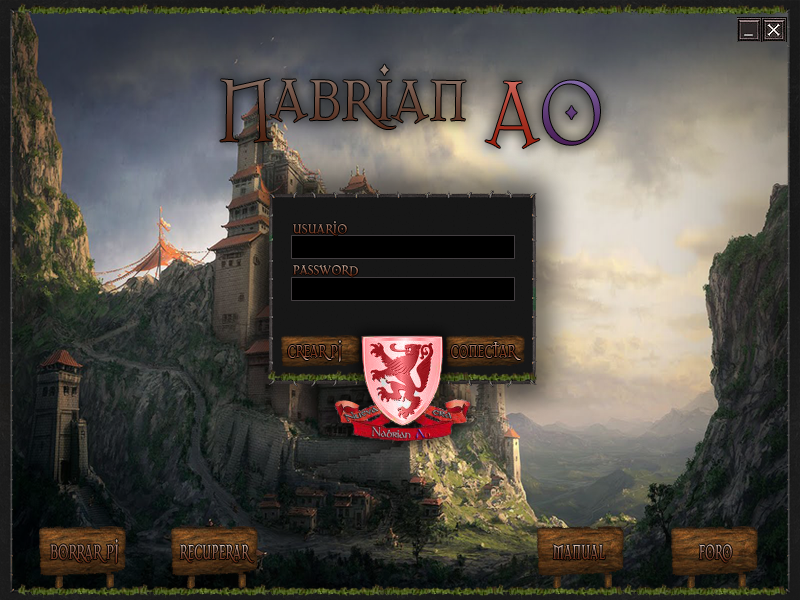
<style>
.page{position:relative;width:800px;height:600px}
.page>*{position:absolute;margin:0}
.t1{font:21.6px "Dark11";scale:0.86 1}
.t2{font:30.2px "Dark11";scale:0.62 1}
.t3{font:35.6px "Dark11";scale:0.56 1}
.t4{font:35.6px "Dark11";scale:0.52 1}
</style>
<div class="page">
<p class="t1" style="left:293px;top:221px;width:54px;height:15px">usuario</p>
<p class="t1" style="left:293px;top:264px;width:66px;height:13px">password</p>
<p class="t2" style="left:288px;top:340px;width:54px;height:22px">crear pj</p>
<p class="t2" style="left:451px;top:342px;width:70px;height:18px">conectar</p>
<p class="t3" style="left:50px;top:539px;width:69px;height:25px;rotate:1deg">borrar pj</p>
<p class="t4" style="left:180px;top:544px;width:74px;height:19px;rotate:1deg">recuperar</p>
<p class="t4" style="left:553px;top:544px;width:53px;height:17px;rotate:1deg">manual</p>
<p class="t4" style="left:699px;top:544px;width:33px;height:19px;rotate:1deg">foro</p>
</div>
